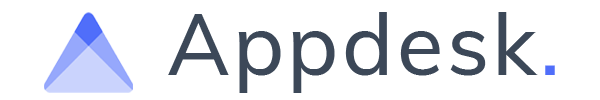
<style>
.page{position:relative;width:600px;height:100px;background:#ffffff}
.page>*{position:absolute;margin:0}
.t1{font:85px "Muli-Medium";letter-spacing:0.04em;color:#3c4858}
.t2{font:85px "Muli-Medium";letter-spacing:0.04em;color:#506efa}
</style>
<div class="page">
<p class="t1" style="left:168px;top:12px;width:387px;height:81px">Appdesk<span class="t2">.</span></p>
</div>
